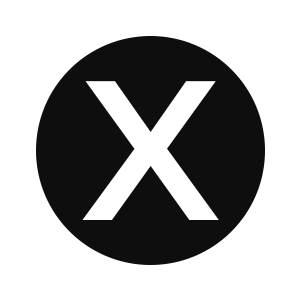
<style>
.page{position:relative;width:300px;height:300px;background:#ffffff}
.page>*{position:absolute;margin:0}
.t1{font:208.3px "ProximaNova-Semibold";letter-spacing:0.02em;color:#ffffff}
</style>
<div class="page">
<p class="t1" style="left:82px;top:81px;width:137px;height:139px">X</p>
</div>
